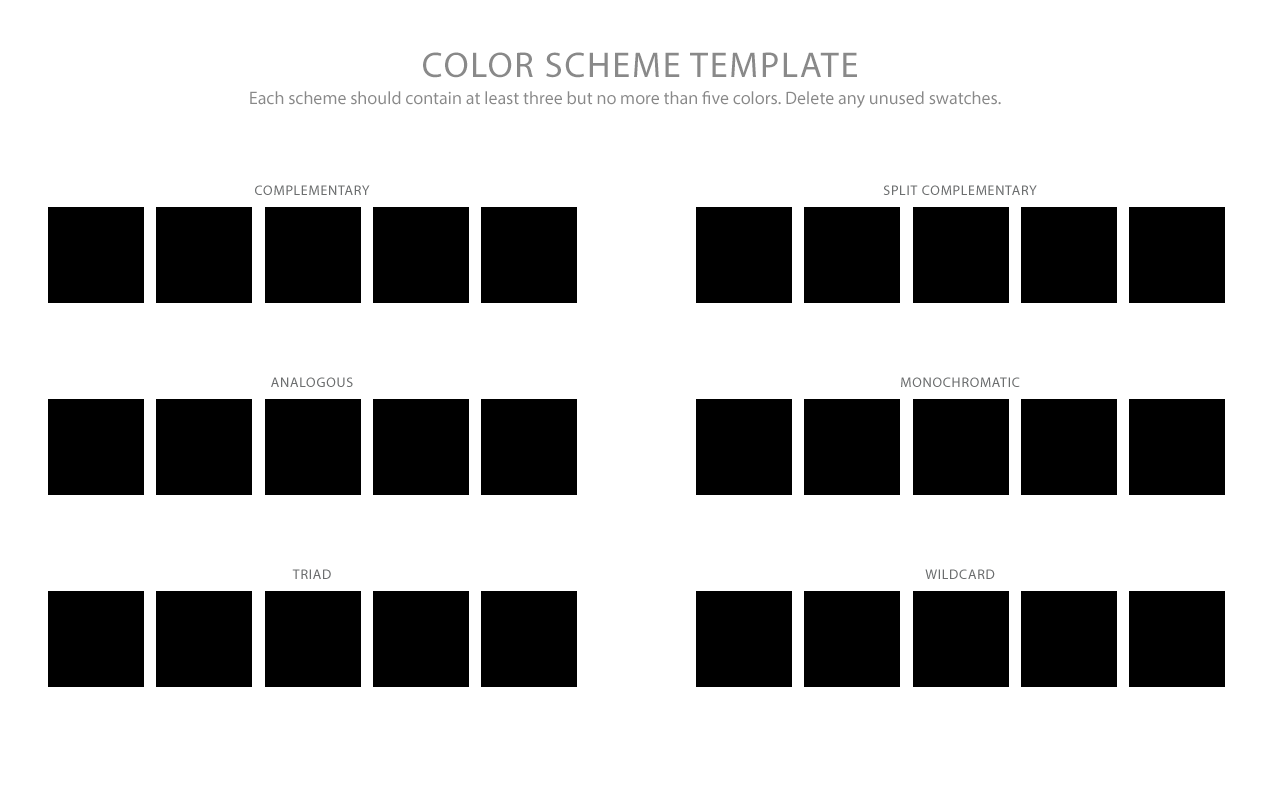
<style>
.page{position:relative;width:1280px;height:800px;background:#ffffff}
.page>*{position:absolute;margin:0}
.t1{font:36px "MyriadPro-Regular";letter-spacing:0.05em;color:#898989;text-transform:uppercase}
.t2{font:18px "MyriadPro-Regular";color:#898989}
.t3{font:14px "MyriadPro-Regular";letter-spacing:0.05em;color:#6c6e6f;text-transform:uppercase}
</style>
<div class="page">
<p class="t1" style="left:423px;top:52px;width:434px;height:26px">color scheme template</p>
<p class="t2" style="left:250px;top:91px;width:751px;height:17px">Each scheme should contain at least three but no more than five colors. Delete any unused swatches.</p>
<p class="t3" style="left:255px;top:185px;width:115px;height:10px">complementary</p>
<p class="t3" style="left:883px;top:185px;width:154px;height:10px">split complementary</p>
<p class="t3" style="left:271px;top:377px;width:82px;height:10px">analogous</p>
<p class="t3" style="left:901px;top:377px;width:119px;height:10px">monochromatic</p>
<p class="t3" style="left:292px;top:569px;width:39px;height:10px">triad</p>
<p class="t3" style="left:925px;top:569px;width:70px;height:10px">wildcard</p>
</div>
